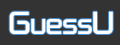
<style>
.page{position:relative;width:120px;height:45px;background:#333333}
.page>*{position:absolute;margin:0}
.t1{font:30px "TRENDS";color:#ffffff}
</style>
<div class="page">
<p class="t1" style="left:9px;top:11px;width:104px;height:23px">GuessU</p>
</div>
